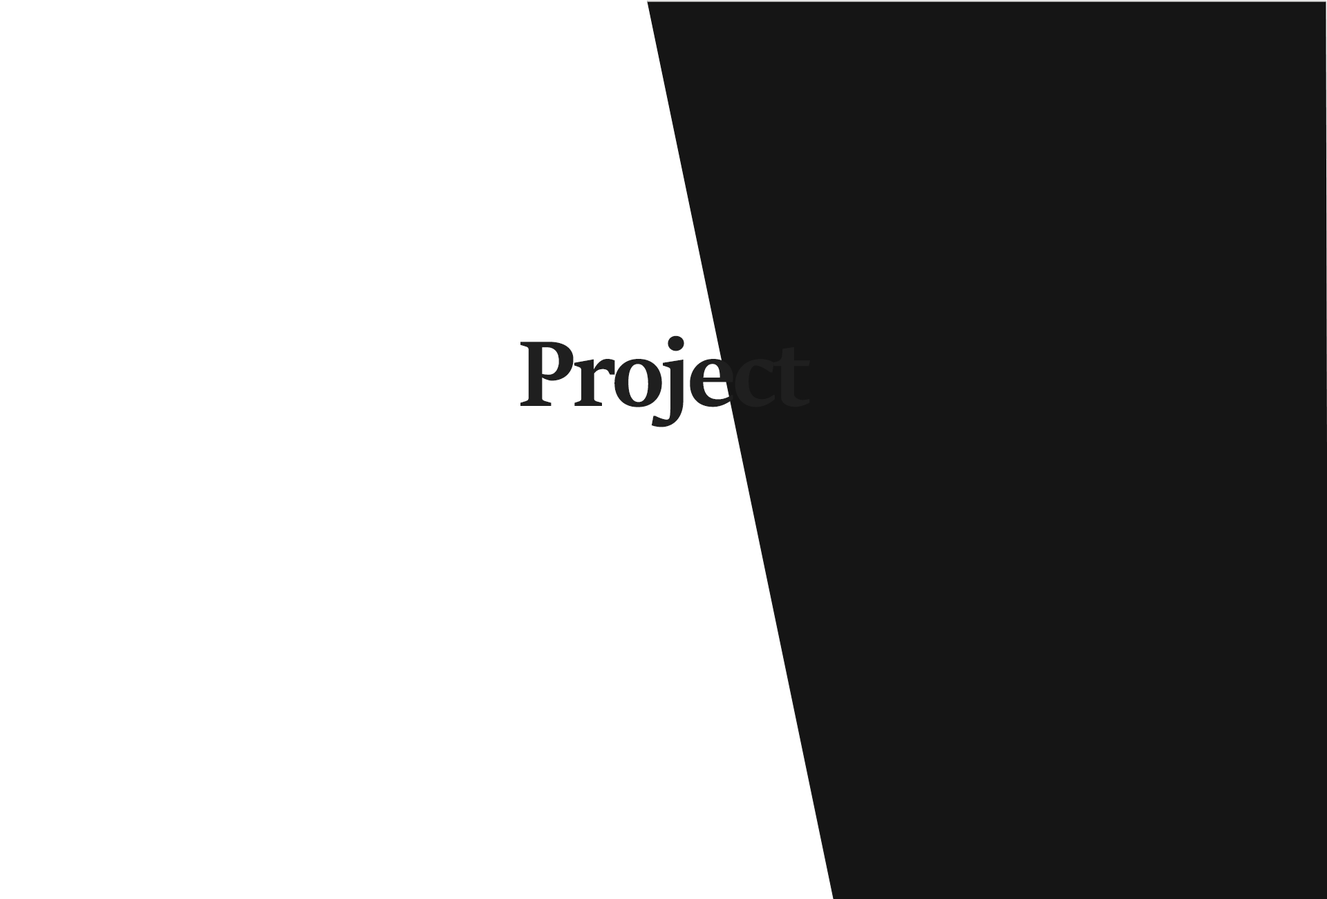
<style>
.page{position:relative;width:1327px;height:899px;background:#ffffff}
.page>*{position:absolute;margin:0}
.t1{font:103.7px "SitkaDisplay-Bold";letter-spacing:-0.025em;color:#1f1f1f}
</style>
<div class="page">
<p class="t1" style="left:520px;top:335px;width:290px;height:92px">Project</p>
</div>
